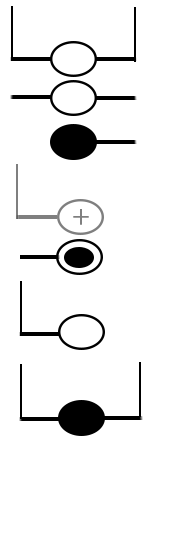
<style>
.page{position:relative;width:180px;height:540px;background:#ffffff}
.page>*{position:absolute;margin:0}
.t1{font:7.2px "MyriadPro-Regular";color:#7f7f7f}
</style>
<div class="page">
<p class="t1" style="left:73px;top:209px;width:16px;height:16px">+</p>
</div>
